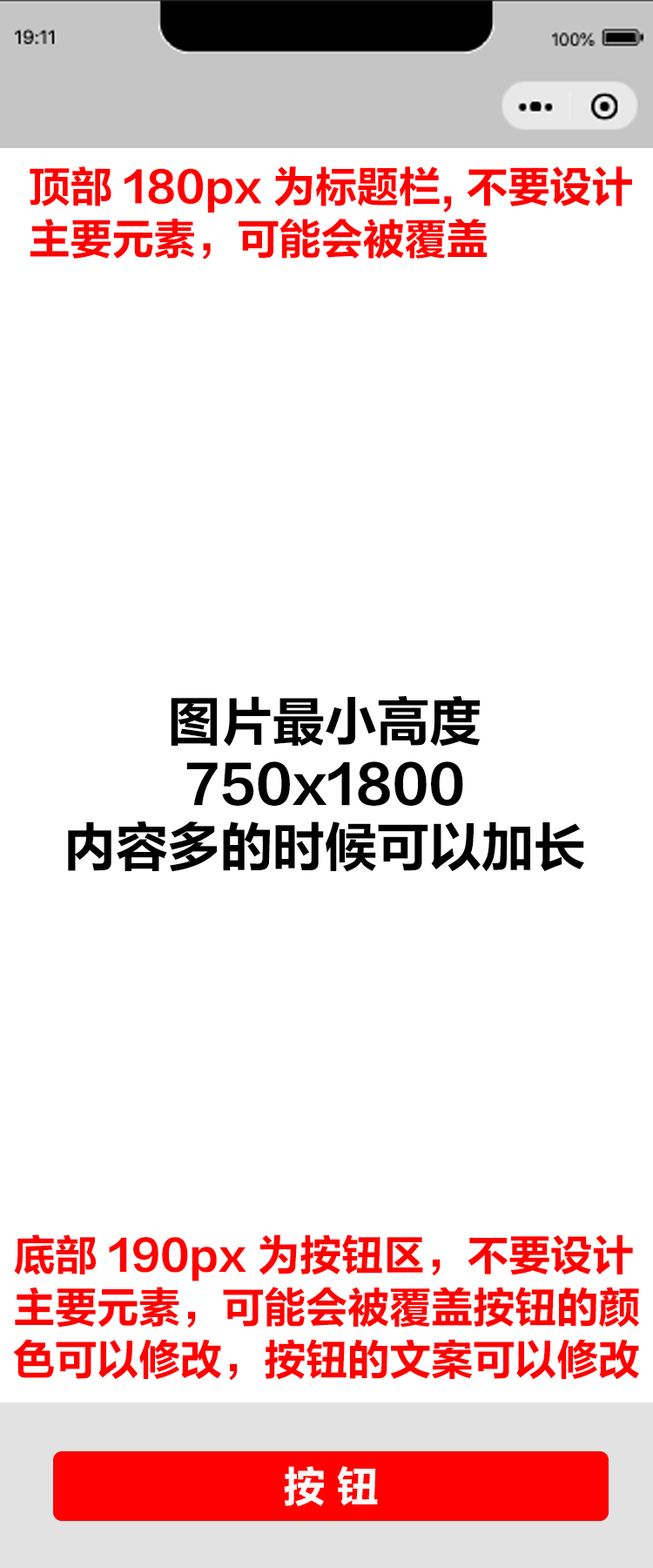
<style>
.page{position:relative;width:653px;height:1568px;background:#ffffff}
.page>*{position:absolute;margin:0}
.t1{font:41.8px/52.3px "FZLTCHJW--GB1-0";color:#ff0000}
.t2{font:52.3px/62.7px "FZLTCHJW--GB1-0";color:#000000}
.t3{font:41.8px "FZLTCHJW--GB1-0";color:#fffafa}
</style>
<div class="page">
<p class="t1" style="left:30px;top:166px;width:602px;height:94px">顶部 180px 为标题栏, 不要设计<br>主要元素，可能会被覆盖</p>
<p class="t2" style="left:68px;top:696px;width:517px;height:176px;text-align:center">图片最小高度<br>750x1800<br>内容多的时候可以加长</p>
<p class="t1" style="left:13px;top:1234px;width:627px;height:146px">底部 190px 为按钮区，不要设计<br>主要元素，可能会被覆盖按钮的颜<br>色可以修改，按钮的文案可以修改</p>
<p class="t3" style="left:284px;top:1466px;width:94px;height:40px">按 钮</p>
</div>
